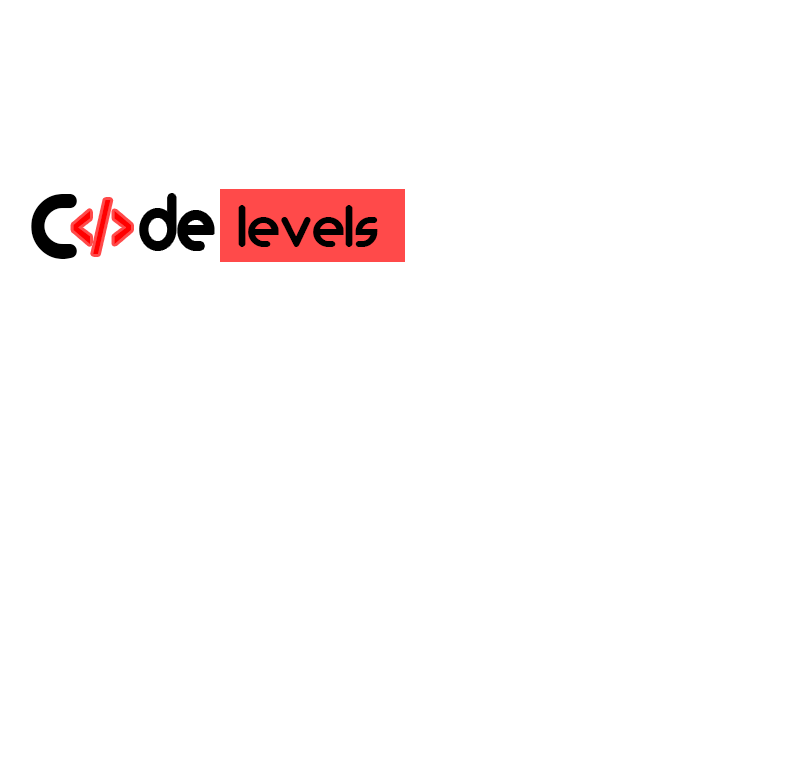
<style>
.page{position:relative;width:806px;height:782px;background:#ffffff}
.page>*{position:absolute;margin:0}
.t1{font:126.4px "MonoglycerideBold";color:#000000}
.t2{font:76.6px "MonoglycerideBold";color:#000000;scale:0.9 1}
.t3{font:66.1px "LeelawadeeUI-Bold";color:#ff0000;scale:0.54 1}
.t4{font:60.3px "MonoglycerideBold";color:#000000}
</style>
<div class="page">
<p class="t1" style="left:31px;top:194px;width:46px;height:65px">c</p>
<p class="t2" style="left:140px;top:194px;width:74px;height:56px">de</p>
<p class="t3" style="left:73px;top:200px;width:58px;height:54px">&lt;/&gt;</p>
<p class="t4" style="left:238px;top:205px;width:140px;height:42px">levels</p>
</div>
